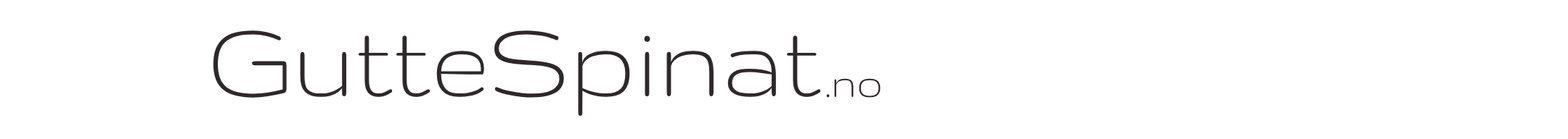
<style>
.page{position:relative;width:1568px;height:139px;background:#ffffff}
.page>*{position:absolute;margin:0}
.t1{font:118.8px "Gruppo";color:#2f282a;scale:0.91 1}
.t2{font:47.6px "Gruppo";color:#2f282a;scale:0.91 1}
</style>
<div class="page">
<p class="t1" style="left:213px;top:30px;width:608px;height:86px">GutteSpinat</p>
<p class="t2" style="left:826px;top:78px;width:55px;height:20px">.no</p>
</div>
